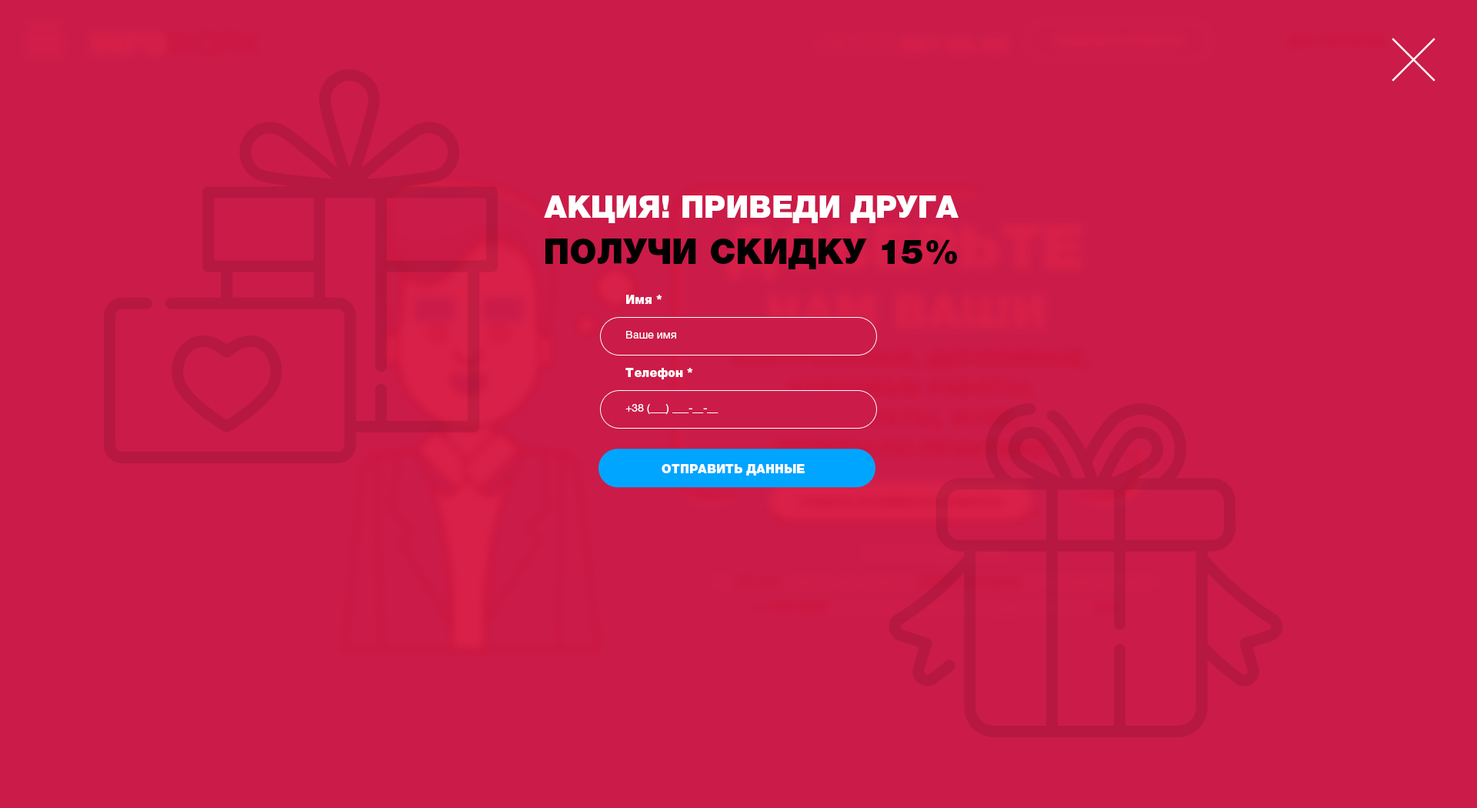
<style>
.page{position:relative;width:1477px;height:808px;background:#cb1b49}
.page>*{position:absolute;margin:0}
.t1{font:30.8px "HelveticaNeueCyr-Black";color:#ffffff}
.t2{font:34.6px "HelveticaNeueCyr-Black";color:#000000}
.t3{font:12.3px "HelveticaNeueCyr-Black";color:#ffffff}
.t4{font:10.8px "HelveticaNeueCyr-Roman";color:#ffffff}
</style>
<div class="page">
<p class="t1" style="left:544px;top:195px;width:414px;height:28px">АКЦИЯ! ПРИВЕДИ ДРУГА</p>
<p class="t2" style="left:545px;top:238px;width:412px;height:31px">ПОЛУЧИ СКИДКУ 15%</p>
<p class="t3" style="left:626px;top:295px;width:36px;height:9px">Имя *</p>
<p class="t4" style="left:626px;top:331px;width:50px;height:7px">Ваше имя</p>
<p class="t3" style="left:625px;top:368px;width:68px;height:11px">Телефон *</p>
<p class="t4" style="left:625px;top:404px;width:93px;height:11px">+38 (___) ___-__-__</p>
<p class="t3" style="left:661px;top:464px;width:143px;height:11px">ОТПРАВИТЬ ДАННЫЕ</p>
</div>
